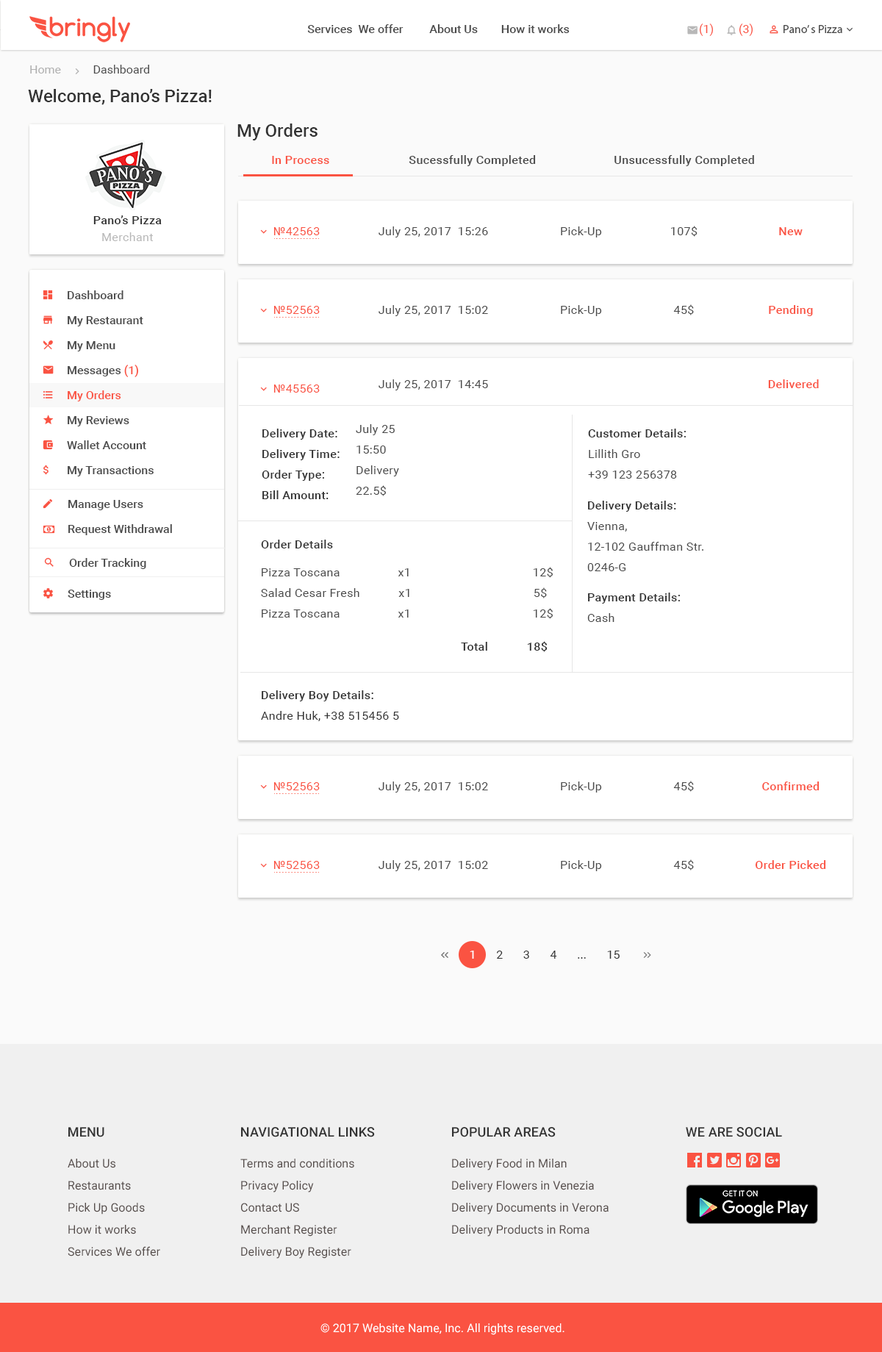
<style>
.page{position:relative;width:882px;height:1352px;background:#ffffff}
.page>*{position:absolute;margin:0}
.t1{font:11.8px "Roboto-Medium";color:#4a4a4a}
.t2{font:11.8px "Roboto-Regular";color:#fa5342}
.t3{font:11.8px "MyriadPro-Regular";color:#4a4a4a}
.t4{font:11.8px "Roboto-Regular";color:#4a4a4a}
.t5{font:11.8px "Roboto-Regular";color:#b0b0b0}
.t6{font:17.6px "Roboto-Medium";color:#333333}
.t7{font:11.8px "Roboto-Medium";letter-spacing:0.025em;color:#fa5342}
.t8{font:11.8px "Roboto-Medium";letter-spacing:0.025em;color:#4a4a4a}
.t9{font:11.8px "Roboto-Medium";letter-spacing:0.025em;color:#333333}
.t10{font:11.8px "Roboto-Regular";letter-spacing:0.025em;color:#b8b8b8}
.t11{font:11.8px "Roboto-Regular";letter-spacing:0.025em;color:#fa5342}
.t12{font:11.8px "Roboto-Regular";letter-spacing:0.025em;color:#4a4a4a}
.t13{font:11.8px/25px "Roboto-Medium";color:#4a4a4a}
.t14{font:11.8px/25px "Roboto-Medium";color:#fa5342}
.t15{font:11.8px/20.6px "Roboto-Regular";letter-spacing:0.025em;color:#4a4a4a}
.t16{font:11.8px/20.6px "Roboto-Medium";letter-spacing:0.025em;color:#333333}
.t17{font:11.8px/20.6px "Roboto-Regular";letter-spacing:0.025em;color:#333333}
.t18{font:11.8px "Roboto-Regular";color:#333333}
.t19{font:11.8px "Roboto-Regular";color:#ffffff}
.t20{font:13.2px "Roboto-Medium";letter-spacing:0.005em;color:#333333}
.t21{font:13.2px "Roboto-Medium";letter-spacing:0.005em;color:#333333;text-transform:uppercase}
.t22{font:11.8px/22.1px "Roboto-Regular";letter-spacing:0.005em;color:#554c4a}
.t23{font:11.8px "Roboto-Regular";letter-spacing:0.005em;color:#ffffff}
</style>
<div class="page">
<p class="t1" style="left:307px;top:24px;width:263px;height:9px">Services  We offer         About Us        How it works</p>
<p class="t2" style="left:699px;top:24px;width:14px;height:12px">(1)</p>
<p class="t2" style="left:739px;top:24px;width:14px;height:12px">(3)</p>
<p class="t3" style="left:784px;top:25px;width:58px;height:8px">Pano’ s Pizza</p>
<p class="t4" style="left:30px;top:65px;width:119px;height:9px"><span class="t5">Home           </span>Dashboard</p>
<p class="t6" style="left:28px;top:89px;width:184px;height:16px">Welcome, Pano’s Pizza!</p>
<p class="t6" style="left:237px;top:123px;width:81px;height:17px">My Orders</p>
<p class="t7" style="left:272px;top:156px;width:57px;height:8px">In Process</p>
<p class="t8" style="left:409px;top:155px;width:127px;height:11px">Sucessfully Completed</p>
<p class="t8" style="left:615px;top:155px;width:139px;height:11px">Unsucessfully Completed</p>
<p class="t9" style="left:93px;top:215px;width:69px;height:9px">Pano’s Pizza</p>
<p class="t10" style="left:102px;top:232px;width:51px;height:9px">Merchant</p>
<p class="t11" style="left:273px;top:227px;width:47px;height:8px">№42563</p>
<p class="t12" style="left:379px;top:226px;width:109px;height:11px">July 25, 2017  15:26</p>
<p class="t12" style="left:561px;top:226px;width:41px;height:11px">Pick-Up</p>
<p class="t12" style="left:671px;top:226px;width:27px;height:11px">107$</p>
<p class="t7" style="left:779px;top:227px;width:24px;height:8px">New</p>
<p class="t13" style="left:67px;top:290px;width:87px;height:186px">Dashboard<br>My Restaurant<br>My Menu<br>Messages <span class="t14">(1)<br>My Orders<br></span>My Reviews<br>Wallet Account<br>My Transactions</p>
<p class="t11" style="left:273px;top:306px;width:47px;height:8px">№52563</p>
<p class="t12" style="left:379px;top:305px;width:109px;height:11px">July 25, 2017  15:02</p>
<p class="t12" style="left:561px;top:305px;width:41px;height:11px">Pick-Up</p>
<p class="t12" style="left:673px;top:304px;width:21px;height:11px">45$</p>
<p class="t7" style="left:769px;top:305px;width:44px;height:11px">Pending</p>
<p class="t11" style="left:273px;top:384px;width:47px;height:9px">№45563</p>
<p class="t12" style="left:379px;top:379px;width:109px;height:11px">July 25, 2017  14:45</p>
<p class="t7" style="left:768px;top:379px;width:51px;height:9px">Delivered</p>
<p class="t15" style="left:356px;top:424px;width:43px;height:72px">July 25<br>15:50<br>Delivery<br>22.5$</p>
<p class="t16" style="left:262px;top:429px;width:78px;height:70px">Delivery Date: <br>Delivery Time:<br>Order Type: <br>Bill Amount:</p>
<p class="t15" style="left:588px;top:429px;width:98px;height:50px"><span class="t16">Customer Details:<br></span>Lillith Gro<br>+39 123 256378</p>
<p class="t13" style="left:68px;top:500px;width:104px;height:35px">Manage Users <br>Request Withdrawal</p>
<p class="t15" style="left:587px;top:501px;width:116px;height:70px"><span class="t16">Delivery Details:<br></span>Vienna,<br>12-102 Gauffman Str.<br>0246-G</p>
<p class="t9" style="left:261px;top:540px;width:72px;height:8px">Order Details</p>
<p class="t1" style="left:69px;top:558px;width:77px;height:11px">Order Tracking</p>
<p class="t15" style="left:261px;top:567px;width:292px;height:52px">Pizza Toscana                  x1                                      12$<br>Salad Cesar Fresh            x1                                      5$<br>Pizza Toscana                  x1                                      12$</p>
<p class="t1" style="left:68px;top:590px;width:43px;height:10px">Settings</p>
<p class="t16" style="left:587px;top:592px;width:93px;height:30px">Payment Details:<br><span class="t15">Cash</span></p>
<p class="t9" style="left:461px;top:641px;width:87px;height:11px">Total            18$</p>
<p class="t17" style="left:261px;top:690px;width:138px;height:31px"><span class="t16">Delivery Boy Details:<br></span>Andre Huk, +38 515456 5</p>
<p class="t11" style="left:273px;top:782px;width:47px;height:8px">№52563</p>
<p class="t12" style="left:379px;top:781px;width:109px;height:11px">July 25, 2017  15:02</p>
<p class="t12" style="left:561px;top:781px;width:41px;height:11px">Pick-Up</p>
<p class="t12" style="left:673px;top:781px;width:21px;height:11px">45$</p>
<p class="t7" style="left:762px;top:781px;width:58px;height:9px">Confirmed</p>
<p class="t11" style="left:273px;top:861px;width:47px;height:8px">№52563</p>
<p class="t12" style="left:379px;top:860px;width:109px;height:11px">July 25, 2017  15:02</p>
<p class="t12" style="left:561px;top:860px;width:41px;height:11px">Pick-Up</p>
<p class="t12" style="left:673px;top:859px;width:21px;height:11px">45$</p>
<p class="t7" style="left:755px;top:860px;width:71px;height:9px">Order Picked</p>
<p class="t18" style="left:470px;top:950px;width:150px;height:9px"><span class="t19">1    </span>   2       3       4       ...       15</p>
<p class="t20" style="left:68px;top:1127px;width:36px;height:10px">MENU</p>
<p class="t21" style="left:241px;top:1127px;width:134px;height:10px">Navigational Links</p>
<p class="t21" style="left:452px;top:1127px;width:104px;height:10px">Popular Areas</p>
<p class="t21" style="left:686px;top:1127px;width:96px;height:10px">We are social</p>
<p class="t22" style="left:68px;top:1158px;width:92px;height:98px">About Us<br>Restaurants<br>Pick Up Goods <br>How it works <br>Services We offer</p>
<p class="t22" style="left:240px;top:1158px;width:114px;height:100px">Terms and conditions<br>Privacy Policy<br>Contact US <br>Merchant Register <br>Delivery Boy Register</p>
<p class="t22" style="left:452px;top:1158px;width:157px;height:78px">Delivery Food in Milan<br>Delivery Flowers in Venezia<br>Delivery Documents in Verona<br>Delivery Products in Roma</p>
<p class="t23" style="left:320px;top:1323px;width:245px;height:12px">© 2017 Website Name, Inc. All rights reserved.</p>
</div>
